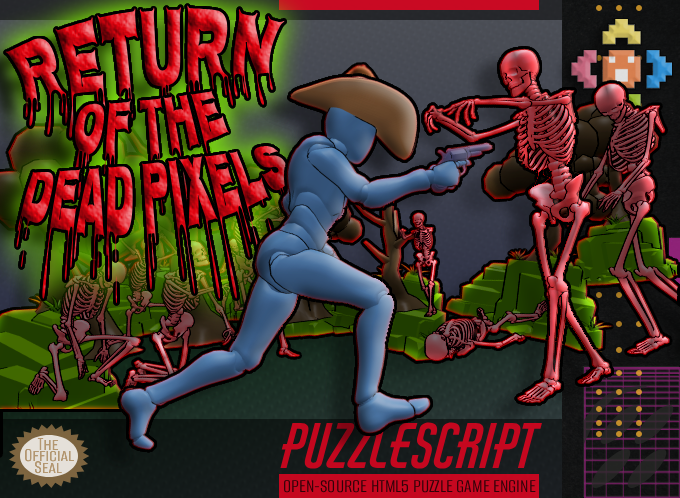
<style>
.page{position:relative;width:680px;height:498px}
.page>*{position:absolute;margin:0}
.t1{font:92.9px "Nosifer-Regular";scale:0.48 1}
.t2{font:23.5px "Nosifer-Regular";scale:1.14 1}
.t3{font:60px "AirAmerica-Regular";color:#c4071f}
.t4{font:20px "AlumniSansSC-Regular";color:#b39771}
.t5{font:20px "AlumniSansSC-Regular";color:#b29771}
.t6{font:20px "AlumniSansSC-Regular";color:#b39670}
.t7{font:20px "AlumniSansRoman-Regular";color:#310208}
</style>
<div class="page">
<p class="t1" style="left:5px;top:5px;width:280px;height:133px;rotate:-6deg">RETURN</p>
<p class="t1" style="left:5px;top:5px;width:280px;height:133px;rotate:-6deg">RETURN</p>
<p class="t2" style="left:74px;top:90px;width:155px;height:124px;rotate:-6deg">of the</p>
<p class="t2" style="left:74px;top:90px;width:155px;height:124px;rotate:-6deg">of the</p>
<p class="t2" style="left:16px;top:146px;width:273px;height:158px;rotate:-6deg">DEAD PIXELS</p>
<p class="t2" style="left:16px;top:146px;width:273px;height:158px;rotate:-6deg">DEAD PIXELS</p>
<p class="t3" style="left:280px;top:422px;width:262px;height:47px">Puzzlescript</p>
<p class="t4" style="left:37px;top:438px;width:21px;height:12px">The</p>
<p class="t5" style="left:25px;top:449px;width:49px;height:13px">Official</p>
<p class="t6" style="left:35px;top:461px;width:27px;height:13px">Seal</p>
<p class="t7" style="left:284px;top:480px;width:252px;height:13px">OPEN-SOURCE HTML5 PUZZLE GAME ENGINE</p>
</div>
